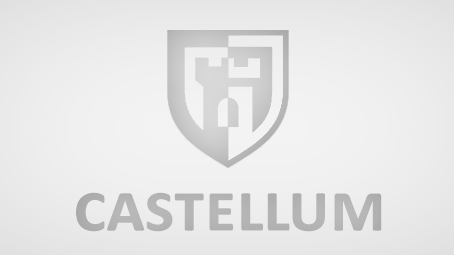
<style>
.page{position:relative;width:454px;height:255px}
.page>*{position:absolute;margin:0}
.t1{font:71.2px "Calibri-Bold";color:#b4b4b4;font-variant:small-caps}
</style>
<div class="page">
<p class="t1" style="left:76px;top:192px;width:306px;height:40px">castellum</p>
</div>
